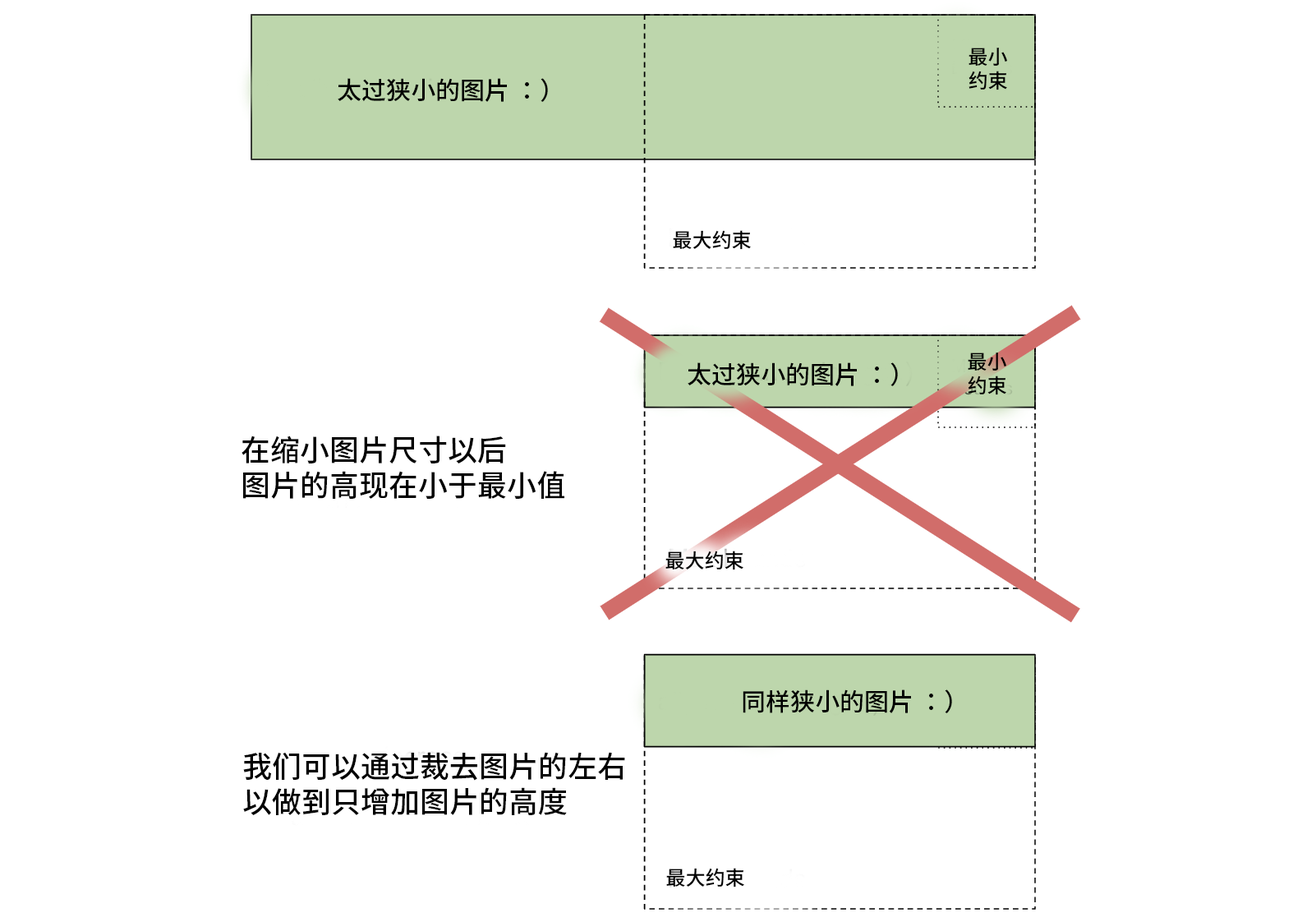
<style>
.page{position:relative;width:1293px;height:922px;background:#ffffff}
.page>*{position:absolute;margin:0}
.t1{font:19.7px "SourceHanSans-Medium";color:#000000}
.t2{font:24.7px "SourceHanSans-Medium";color:#000000}
.t3{font:29.6px "SourceHanSans-Medium";color:#000000}
</style>
<div class="page">
<p class="t1" style="left:969px;top:48px;width:38px;height:42px">最小<br>约束</p>
<p class="t2" style="left:338px;top:78px;width:210px;height:24px">太过狭小的图片 ：）</p>
<p class="t1" style="left:673px;top:230px;width:78px;height:20px">最大约束</p>
<p class="t1" style="left:968px;top:353px;width:39px;height:42px">最小<br>约束</p>
<p class="t2" style="left:688px;top:362px;width:210px;height:24px">太过狭小的图片 ：）</p>
<p class="t3" style="left:242px;top:436px;width:323px;height:63px">在缩小图片尺寸以后<br>图片的高现在小于最小值</p>
<p class="t1" style="left:666px;top:551px;width:78px;height:19px">最大约束</p>
<p class="t2" style="left:743px;top:689px;width:209px;height:24px">同样狭小的图片 ：）</p>
<p class="t3" style="left:243px;top:752px;width:382px;height:63px">我们可以通过裁去图片的左右<br>以做到只增加图片的高度</p>
<p class="t1" style="left:666px;top:868px;width:78px;height:19px">最大约束</p>
</div>
